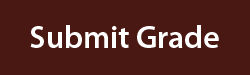
<style>
.page{position:relative;width:250px;height:75px;background:#4a1812}
.page>*{position:absolute;margin:0}
.t1{font:32px "MyriadPro-Semibold";color:#ffffff}
</style>
<div class="page">
<p class="t1" style="left:30px;top:25px;width:189px;height:23px">Submit Grade</p>
</div>
